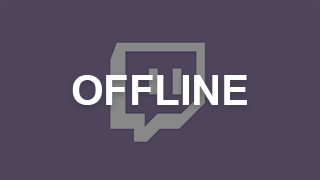
<style>
.page{position:relative;width:320px;height:180px;background:#4e455d}
.page>*{position:absolute;margin:0}
.t1{font:41.6px "Arial-BoldMT";color:#ffffff}
</style>
<div class="page">
<p class="t1" style="left:72px;top:75px;width:175px;height:30px">OFFLINE</p>
</div>
